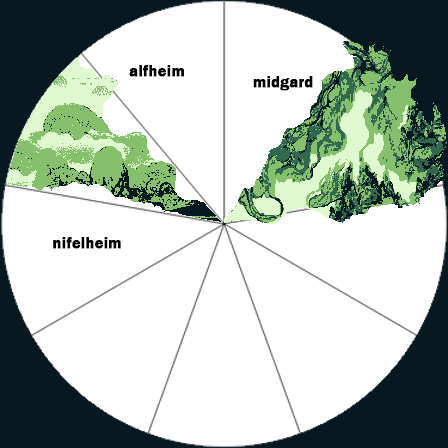
<style>
.page{position:relative;width:448px;height:448px;background:#ffffff}
.page>*{position:absolute;margin:0}
.t1{font:16px "FranklinGothic-Demi";color:#000000;font-weight:bold}
</style>
<div class="page">
<p class="t1" style="left:129px;top:65px;width:55px;height:12px">alfheim</p>
<p class="t1" style="left:253px;top:76px;width:60px;height:15px">midgard</p>
<p class="t1" style="left:53px;top:237px;width:68px;height:12px">nifelheim</p>
</div>
